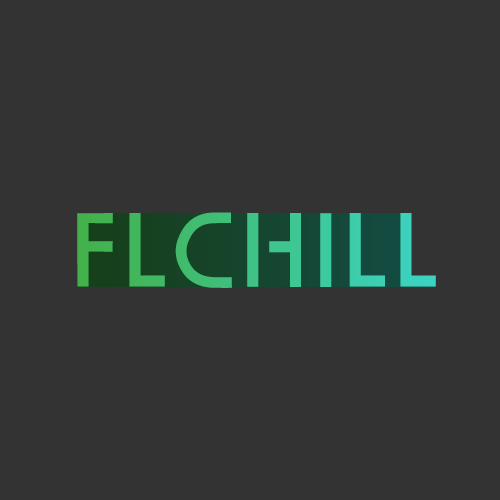
<style>
.page{position:relative;width:500px;height:500px;background:#333333}
.page>*{position:absolute;margin:0}
.t1{font:91.7px "FoundationLogo";letter-spacing:-0.23em}
</style>
<div class="page">
<p class="t1" style="left:77px;top:212px;width:359px;height:76px">FLChill</p>
</div>
